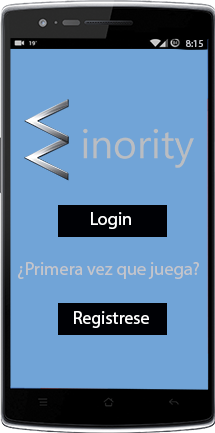
<style>
.page{position:relative;width:215px;height:433px;background:#71a4d7}
.page>*{position:absolute;margin:0}
.t1{font:10px "MyriadPro-Regular";color:#c4c5cb}
.t2{font:18px "MyriadPro-Regular";color:#ffffff}
.t3{font:18.4px "MyriadPro-Regular";color:#c4c5cb}
</style>
<div class="page">
<p class="t1" style="left:186px;top:40px;width:17px;height:7px">8:15</p>
<p class="t2" style="left:91px;top:212px;width:40px;height:17px">Login</p>
<p class="t3" style="left:18px;top:262px;width:181px;height:17px">¿Primera vez que juega?</p>
<p class="t2" style="left:74px;top:311px;width:75px;height:17px">Registrese</p>
</div>
